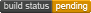
<style>
.page{position:relative;width:91px;height:13px}
.page>*{position:absolute;margin:0}
.t1{font:10px "ArialMT";color:#cccccc;scale:0.9 1}
.t2{font:10px "ArialMT";color:#ffffff;scale:0.9 1}
</style>
<div class="page">
<p class="t1" style="left:4px;top:2px;width:46px;height:7px">build status</p>
<p class="t2" style="left:56px;top:2px;width:32px;height:9px">pending</p>
</div>
